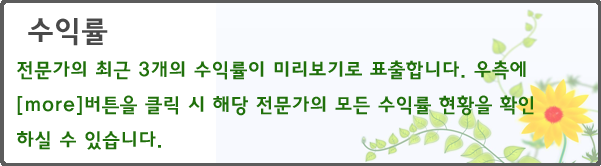
<style>
.page{position:relative;width:601px;height:166px;background:#ffffff}
.page>*{position:absolute;margin:0}
.t1{font:30px "HaanYGodic24";color:#494949}
.t2{font:20px "HaanYGodic24";color:#20700b}
</style>
<div class="page">
<p class="t1" style="left:28px;top:18px;width:80px;height:28px">수익률</p>
<p class="t2" style="left:17px;top:60px;width:517px;height:90px">전문가의 최근 3개의 수익률이 미리보기로 표출합니다. 우측에 [more]버튼을 클릭 시 해당 전문가의 모든 수익률 현황을 확인 하실 수 있습니다.</p>
</div>
